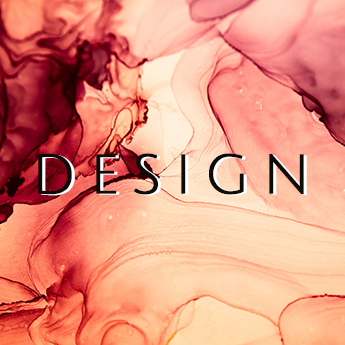
<style>
.page{position:relative;width:345px;height:345px}
.page>*{position:absolute;margin:0}
.t1{font:54.2px "JuliusSansOne-Regular";letter-spacing:0.22em;color:#0c0d08;text-transform:uppercase;font-weight:bold}
</style>
<div class="page">
<p class="t1" style="left:38px;top:153px;width:266px;height:42px">DESIGN</p>
</div>
